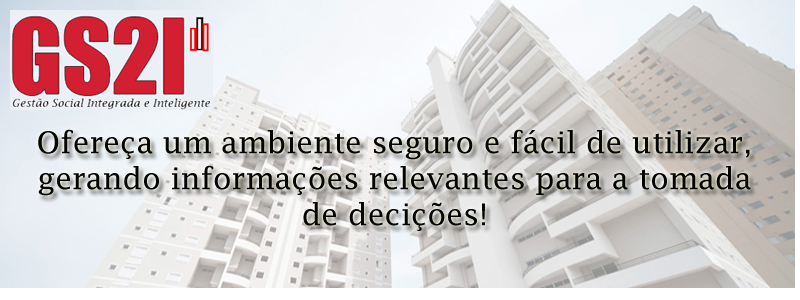
<style>
.page{position:relative;width:800px;height:300px}
.page>*{position:absolute;margin:0}
.t1{font:30px "LucidaFax";color:#040404}
</style>
<div class="page">
<p class="t1" style="left:38px;top:129px;width:713px;height:102px;text-align:center">Ofereça um ambiente seguro e fácil de utilizar, gerando informações relevantes para a tomada de decições!</p>
</div>
